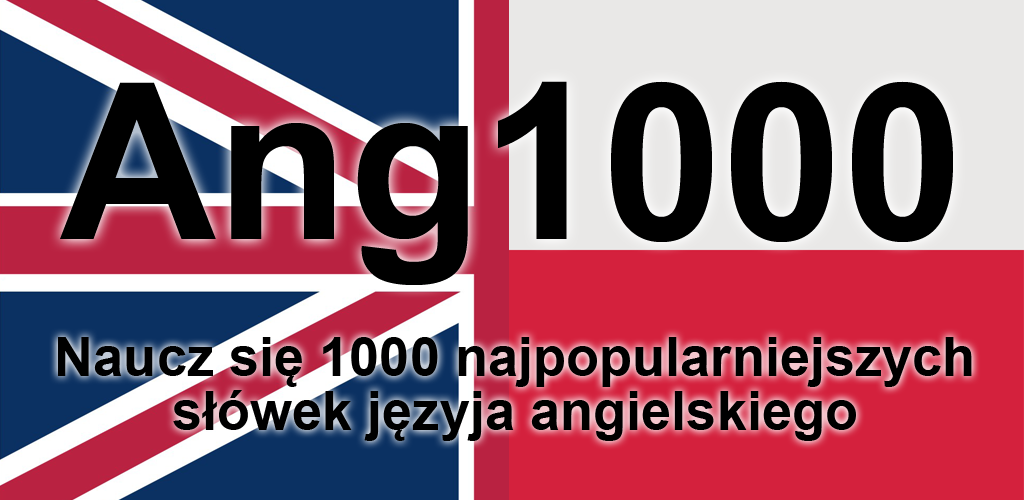
<style>
.page{position:relative;width:1024px;height:500px}
.page>*{position:absolute;margin:0}
.t1{font:216.7px "Arial-BoldMT";color:#000000}
.t2{font:54.2px/54.2px "Arial-BoldMT";color:#000000}
</style>
<div class="page">
<p class="t1" style="left:60px;top:81px;width:893px;height:204px">Ang1000</p>
<p class="t2" style="left:58px;top:337px;width:914px;height:104px;text-align:center">Naucz się 1000 najpopularniejszych<br>słówek języja angielskiego</p>
</div>
